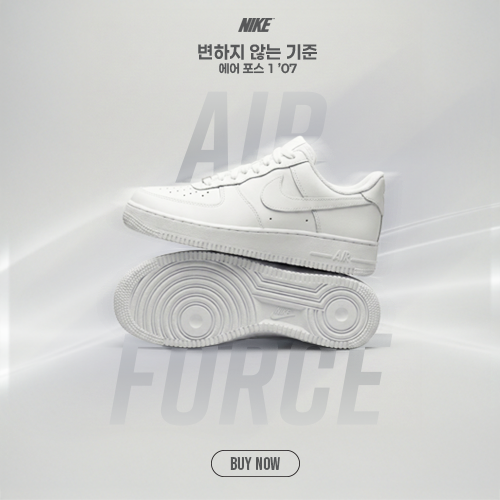
<style>
.page{position:relative;width:500px;height:500px}
.page>*{position:absolute;margin:0}
.t1{font:12px/14px "Paperlogy-7Bold";letter-spacing:0.01em;color:#575859}
.t2{font:18px/14px "Paperlogy-7Bold";letter-spacing:0.01em;color:#575859}
.t3{font:18px "BebasNeue-Regular";letter-spacing:0.01em;color:#575859}
</style>
<div class="page">
<p class="t1" style="left:198px;top:44px;width:119px;height:30px;text-align:center"><span class="t2">변하지 않는 기준 <br></span>에어 포스 1 ’07</p>
<p class="t3" style="left:230px;top:457px;width:50px;height:13px">buy now</p>
</div>
